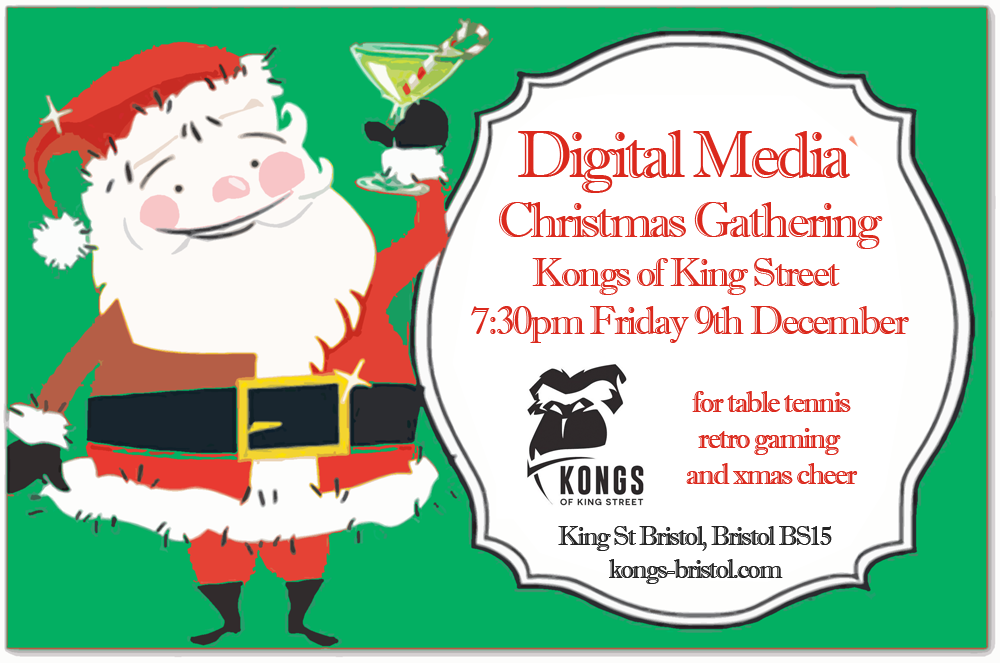
<style>
.page{position:relative;width:1000px;height:663px;background:#03af62}
.page>*{position:absolute;margin:0}
.t1{font:40.3px "ImprintMT-Shadow";letter-spacing:-0.07em;color:#db291d}
.t2{font:67.2px "ImprintMT-Shadow";letter-spacing:-0.07em;color:#db291d}
.t3{font:50.4px "ImprintMT-Shadow";letter-spacing:-0.07em;color:#db291d}
.t4{font:30.2px "ImprintMT-Shadow";letter-spacing:-0.07em;color:#db291d}
.t5{font:26.9px "ImprintMT-Shadow";letter-spacing:-0.07em;color:#232323}
</style>
<div class="page">
<p class="t1" style="left:471px;top:130px;width:438px;height:213px;text-align:center"><span class="t2">Digital Media <br></span><span class="t3">Christmas Gathering<br></span>Kongs of King Street <br>7:30pm Friday 9th December</p>
<p class="t4" style="left:686px;top:391px;width:172px;height:93px;text-align:center">for table tennis<br>retro gaming <br>and xmas cheer</p>
<p class="t5" style="left:558px;top:526px;width:274px;height:58px;text-align:center">King St Bristol, Bristol BS15<br>kongs-bristol.com</p>
</div>
